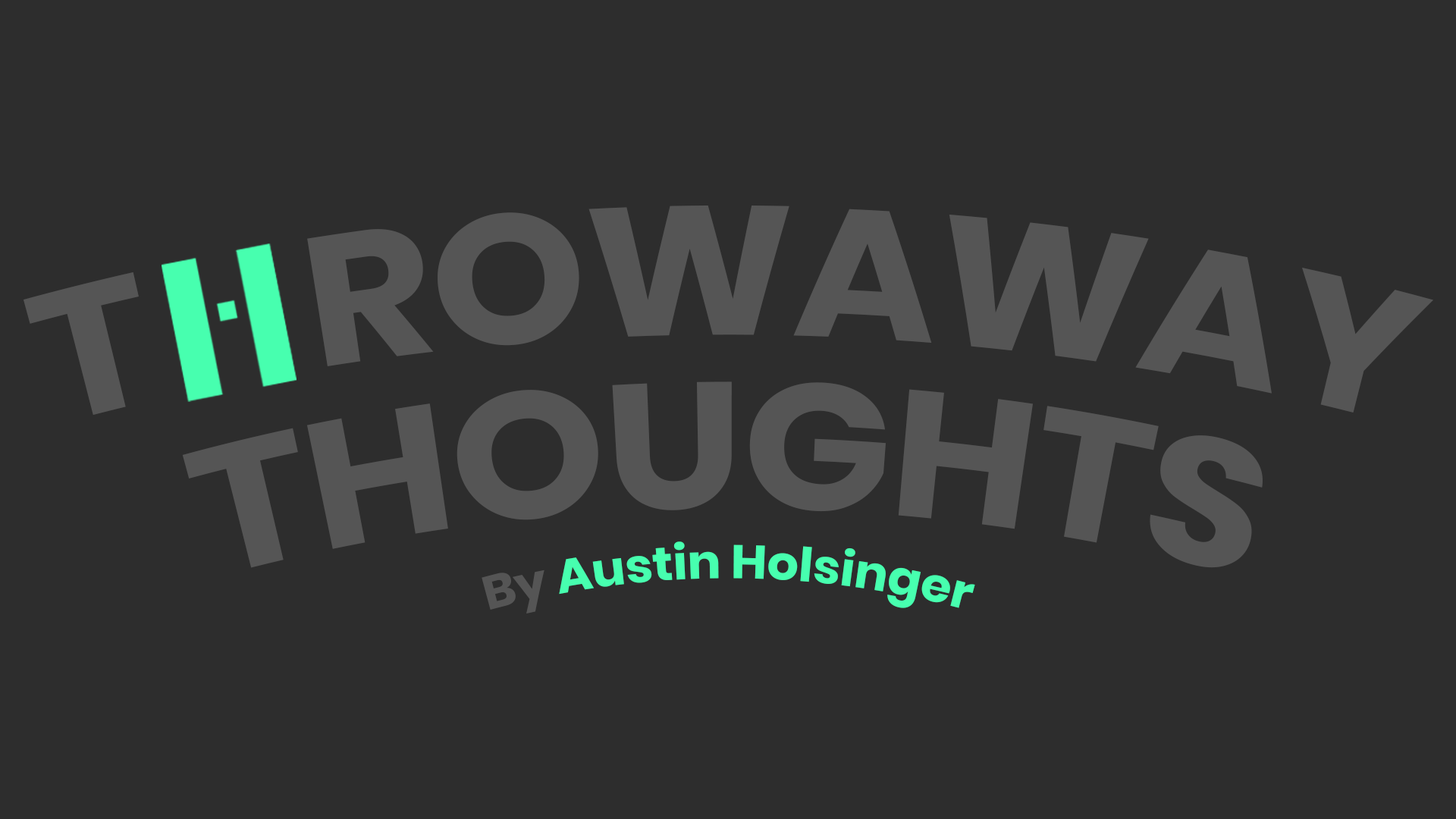
<style>
.page{position:relative;width:1456px;height:819px;background:#2d2d2d}
.page>*{position:absolute;margin:0}
.t1{font:182.7px "Poppins-Bold";color:#555555}
.t2{font:178.5px "Poppins-Bold";color:#555555}
.t3{font:46.9px "Poppins-Bold";color:#47ffaf}
.t4{font:46.9px "Poppins-Bold";color:#555555}
</style>
<div class="page">
<p class="t1" style="left:23px;top:205px;width:1411px;height:211px">T    ROWAWAY</p>
<p class="t2" style="left:182px;top:381px;width:1081px;height:187px">THOUGHTS</p>
<p class="t3" style="left:482px;top:541px;width:493px;height:72px"><span class="t4">By </span>Austin Holsinger</p>
</div>
